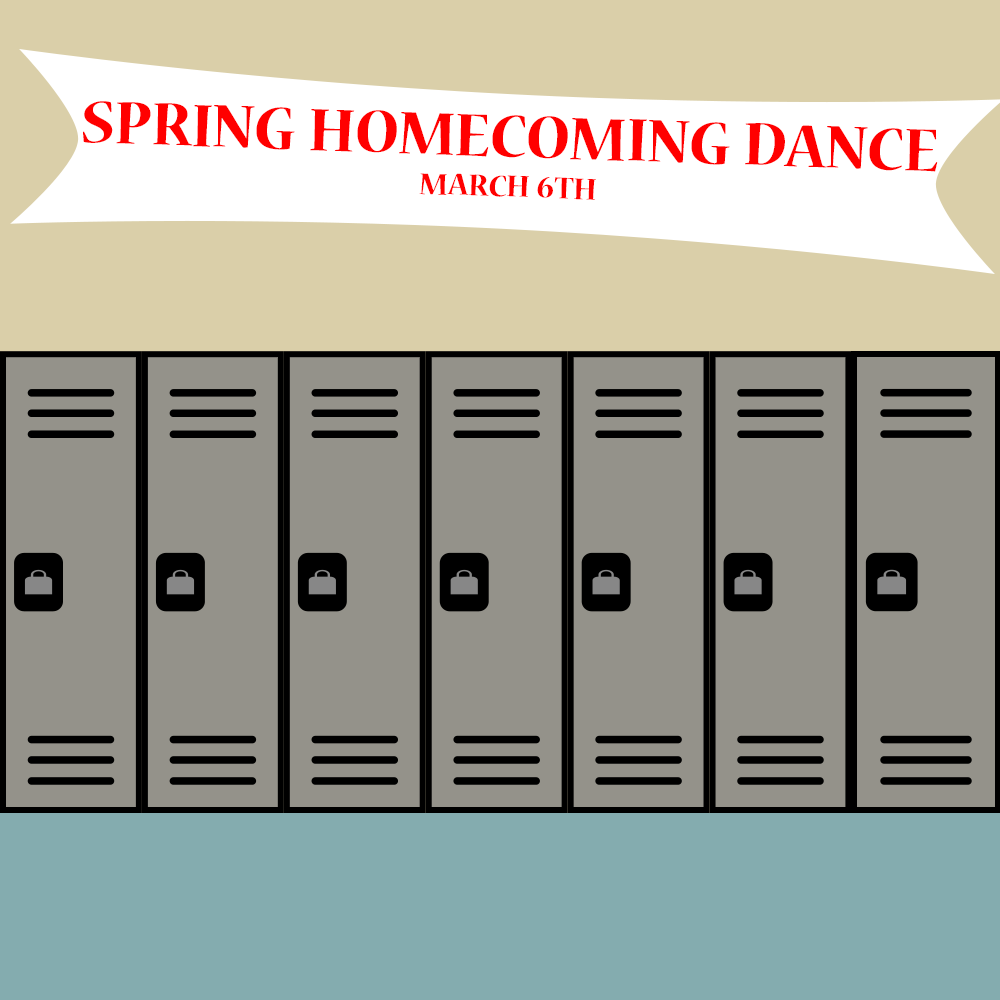
<style>
.page{position:relative;width:1000px;height:1000px;background:#94928a}
.page>*{position:absolute;margin:0}
.t1{font:66.7px "NuevaStd-Bold";color:#ff0000}
.t2{font:33.3px "NuevaStd-Bold";color:#ff0000}
</style>
<div class="page">
<p class="t1" style="left:83px;top:101px;width:855px;height:99px;text-align:center;rotate:2deg">SPRING HOMECOMING DANCE<br><span class="t2">MARCH 6TH</span></p>
</div>
